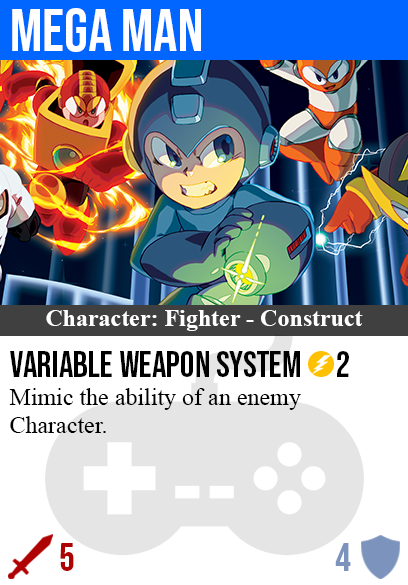
<style>
.page{position:relative;width:408px;height:585px;background:#ffffff}
.page>*{position:absolute;margin:0}
.t1{font:60px "BebasNeue-Regular";color:#ffffff}
.t2{font:24px "TimesNewRomanPS-BoldMT";color:#ffffff}
.t3{font:36px "BebasNeue-Regular";color:#000000}
.t4{font:24px "TimesNewRomanPSMT";color:#000000}
.t5{font:40px "BebasNeue-Regular";color:#af0202}
.t6{font:40px "BebasNeue-Regular";color:#7c94bd}
</style>
<div class="page">
<p class="t1" style="left:12px;top:8px;width:189px;height:44px">mega man</p>
<p class="t2" style="left:46px;top:310px;width:317px;height:21px">Character: Fighter - Construct</p>
<p class="t3" style="left:10px;top:351px;width:339px;height:26px">variable weapon system      2</p>
<p class="t4" style="left:9px;top:388px;width:292px;height:45px">Mimic the ability of an enemy<br>Character.</p>
<p class="t5" style="left:60px;top:543px;width:14px;height:28px">5</p>
<p class="t6" style="left:335px;top:543px;width:16px;height:28px">4</p>
</div>
